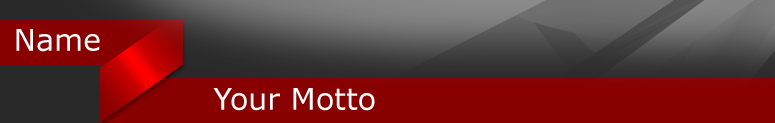
<style>
.page{position:relative;width:775px;height:123px;background:#880000}
.page>*{position:absolute;margin:0}
.t1{font:30px "Verdana";color:#ffffff}
</style>
<div class="page">
<p class="t1" style="left:16px;top:29px;width:84px;height:23px">Name</p>
<p class="t1" style="left:213px;top:88px;width:162px;height:23px">Your Motto</p>
</div>
